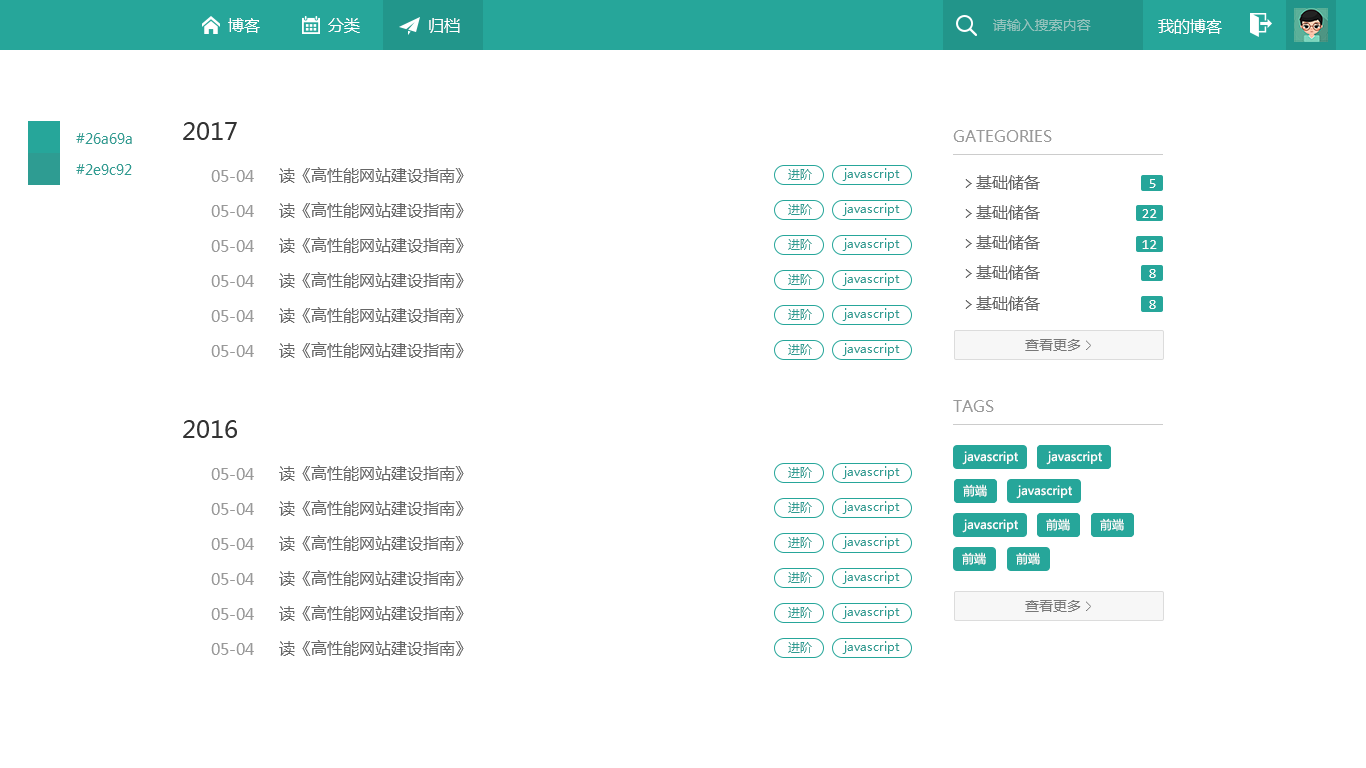
<style>
.page{position:relative;width:1366px;height:768px;background:#ffffff}
.page>*{position:absolute;margin:0}
.t1{font:16px "MicrosoftYaHei";color:#ffffff}
.t2{font:14px "MicrosoftYaHei";color:#95c4be}
.t3{font:24px "MicrosoftYaHei";color:#333333}
.t4{font:14px "MicrosoftYaHei";color:#2e9c92}
.t5{font:16px "MicrosoftYaHei";color:#999999}
.t6{font:16px "MicrosoftYaHei";color:#666666}
.t7{font:12px "MicrosoftYaHei";color:#2e9c92}
.t8{font:16px "Consolas";color:#666666}
.t9{font:14px "Consolas";color:#fefefe}
.t10{font:14px "MicrosoftYaHei";color:#787878}
.t11{font:14px "FangSong";color:#787878}
.t12{font:12px "MicrosoftYaHei";color:#fefefe}
</style>
<div class="page">
<p class="t1" style="left:228px;top:18px;width:32px;height:15px">博客</p>
<p class="t1" style="left:328px;top:18px;width:32px;height:15px">分类</p>
<p class="t1" style="left:429px;top:18px;width:31px;height:15px">归档</p>
<p class="t2" style="left:993px;top:19px;width:98px;height:12px">请输入搜索内容</p>
<p class="t1" style="left:1158px;top:19px;width:64px;height:15px">我的博客</p>
<p class="t3" style="left:183px;top:122px;width:54px;height:18px">2017</p>
<p class="t4" style="left:76px;top:133px;width:56px;height:11px">#26a69a</p>
<p class="t5" style="left:953px;top:130px;width:99px;height:12px">GATEGORIES</p>
<p class="t4" style="left:76px;top:164px;width:56px;height:11px">#2e9c92</p>
<p class="t5" style="left:211px;top:170px;width:43px;height:12px">05-04</p>
<p class="t6" style="left:279px;top:167px;width:185px;height:16px">读《高性能网站建设指南》</p>
<p class="t7" style="left:788px;top:169px;width:24px;height:11px">进阶</p>
<p class="t7" style="left:842px;top:168px;width:58px;height:13px">javascript</p>
<p class="t6" style="left:965px;top:175px;width:75px;height:15px"><span class="t8">&gt; </span>基础储备</p>
<p class="t9" style="left:1149px;top:179px;width:7px;height:9px">5</p>
<p class="t5" style="left:211px;top:205px;width:43px;height:12px">05-04</p>
<p class="t6" style="left:279px;top:202px;width:185px;height:16px">读《高性能网站建设指南》</p>
<p class="t7" style="left:788px;top:204px;width:24px;height:11px">进阶</p>
<p class="t7" style="left:842px;top:203px;width:58px;height:13px">javascript</p>
<p class="t6" style="left:965px;top:205px;width:75px;height:15px"><span class="t8">&gt; </span>基础储备</p>
<p class="t9" style="left:1142px;top:209px;width:15px;height:9px">22</p>
<p class="t5" style="left:211px;top:240px;width:43px;height:12px">05-04</p>
<p class="t6" style="left:279px;top:237px;width:185px;height:16px">读《高性能网站建设指南》</p>
<p class="t7" style="left:788px;top:239px;width:24px;height:11px">进阶</p>
<p class="t7" style="left:842px;top:238px;width:58px;height:13px">javascript</p>
<p class="t6" style="left:965px;top:235px;width:75px;height:15px"><span class="t8">&gt; </span>基础储备</p>
<p class="t9" style="left:1142px;top:240px;width:15px;height:9px">12</p>
<p class="t6" style="left:965px;top:265px;width:75px;height:15px"><span class="t8">&gt; </span>基础储备</p>
<p class="t9" style="left:1149px;top:269px;width:7px;height:9px">8</p>
<p class="t5" style="left:211px;top:275px;width:43px;height:12px">05-04</p>
<p class="t6" style="left:279px;top:272px;width:185px;height:16px">读《高性能网站建设指南》</p>
<p class="t7" style="left:788px;top:274px;width:24px;height:11px">进阶</p>
<p class="t7" style="left:842px;top:273px;width:58px;height:13px">javascript</p>
<p class="t6" style="left:965px;top:296px;width:75px;height:15px"><span class="t8">&gt; </span>基础储备</p>
<p class="t9" style="left:1149px;top:300px;width:7px;height:9px">8</p>
<p class="t5" style="left:211px;top:310px;width:43px;height:12px">05-04</p>
<p class="t6" style="left:279px;top:307px;width:185px;height:16px">读《高性能网站建设指南》</p>
<p class="t7" style="left:788px;top:309px;width:24px;height:11px">进阶</p>
<p class="t7" style="left:842px;top:308px;width:58px;height:13px">javascript</p>
<p class="t6" style="left:279px;top:342px;width:185px;height:16px">读《高性能网站建设指南》</p>
<p class="t10" style="left:1025px;top:339px;width:66px;height:12px">查看更多 <span class="t11">&gt;</span></p>
<p class="t5" style="left:211px;top:345px;width:43px;height:12px">05-04</p>
<p class="t7" style="left:788px;top:344px;width:24px;height:11px">进阶</p>
<p class="t7" style="left:842px;top:343px;width:58px;height:13px">javascript</p>
<p class="t5" style="left:953px;top:400px;width:41px;height:12px">TAGS</p>
<p class="t3" style="left:183px;top:420px;width:54px;height:18px">2016</p>
<p class="t12" style="left:962px;top:451px;width:56px;height:14px">javascript</p>
<p class="t12" style="left:1046px;top:451px;width:56px;height:14px">javascript</p>
<p class="t12" style="left:1046px;top:451px;width:56px;height:14px">javascript</p>
<p class="t5" style="left:211px;top:468px;width:43px;height:12px">05-04</p>
<p class="t6" style="left:279px;top:465px;width:185px;height:16px">读《高性能网站建设指南》</p>
<p class="t7" style="left:788px;top:467px;width:24px;height:11px">进阶</p>
<p class="t7" style="left:842px;top:466px;width:58px;height:13px">javascript</p>
<p class="t12" style="left:963px;top:484px;width:24px;height:13px">前端</p>
<p class="t12" style="left:963px;top:484px;width:24px;height:13px">前端</p>
<p class="t12" style="left:1016px;top:485px;width:56px;height:14px">javascript</p>
<p class="t5" style="left:211px;top:503px;width:43px;height:12px">05-04</p>
<p class="t6" style="left:279px;top:500px;width:185px;height:16px">读《高性能网站建设指南》</p>
<p class="t7" style="left:788px;top:502px;width:24px;height:11px">进阶</p>
<p class="t7" style="left:842px;top:501px;width:58px;height:13px">javascript</p>
<p class="t12" style="left:962px;top:519px;width:56px;height:14px">javascript</p>
<p class="t12" style="left:1046px;top:518px;width:24px;height:13px">前端</p>
<p class="t12" style="left:1046px;top:518px;width:24px;height:13px">前端</p>
<p class="t12" style="left:1100px;top:518px;width:24px;height:13px">前端</p>
<p class="t12" style="left:1100px;top:518px;width:24px;height:13px">前端</p>
<p class="t5" style="left:211px;top:538px;width:43px;height:12px">05-04</p>
<p class="t6" style="left:279px;top:535px;width:185px;height:16px">读《高性能网站建设指南》</p>
<p class="t7" style="left:788px;top:537px;width:24px;height:11px">进阶</p>
<p class="t7" style="left:842px;top:536px;width:58px;height:13px">javascript</p>
<p class="t12" style="left:962px;top:552px;width:24px;height:13px">前端</p>
<p class="t12" style="left:1016px;top:552px;width:24px;height:13px">前端</p>
<p class="t5" style="left:211px;top:573px;width:43px;height:12px">05-04</p>
<p class="t6" style="left:279px;top:570px;width:185px;height:16px">读《高性能网站建设指南》</p>
<p class="t7" style="left:788px;top:572px;width:24px;height:11px">进阶</p>
<p class="t7" style="left:842px;top:571px;width:58px;height:13px">javascript</p>
<p class="t6" style="left:279px;top:605px;width:185px;height:16px">读《高性能网站建设指南》</p>
<p class="t7" style="left:842px;top:606px;width:58px;height:13px">javascript</p>
<p class="t10" style="left:1025px;top:600px;width:66px;height:12px">查看更多 <span class="t11">&gt;</span></p>
<p class="t5" style="left:211px;top:608px;width:43px;height:12px">05-04</p>
<p class="t7" style="left:788px;top:607px;width:24px;height:11px">进阶</p>
<p class="t6" style="left:279px;top:640px;width:185px;height:16px">读《高性能网站建设指南》</p>
<p class="t7" style="left:842px;top:641px;width:58px;height:13px">javascript</p>
<p class="t5" style="left:211px;top:643px;width:43px;height:12px">05-04</p>
<p class="t7" style="left:788px;top:642px;width:24px;height:11px">进阶</p>
</div>
